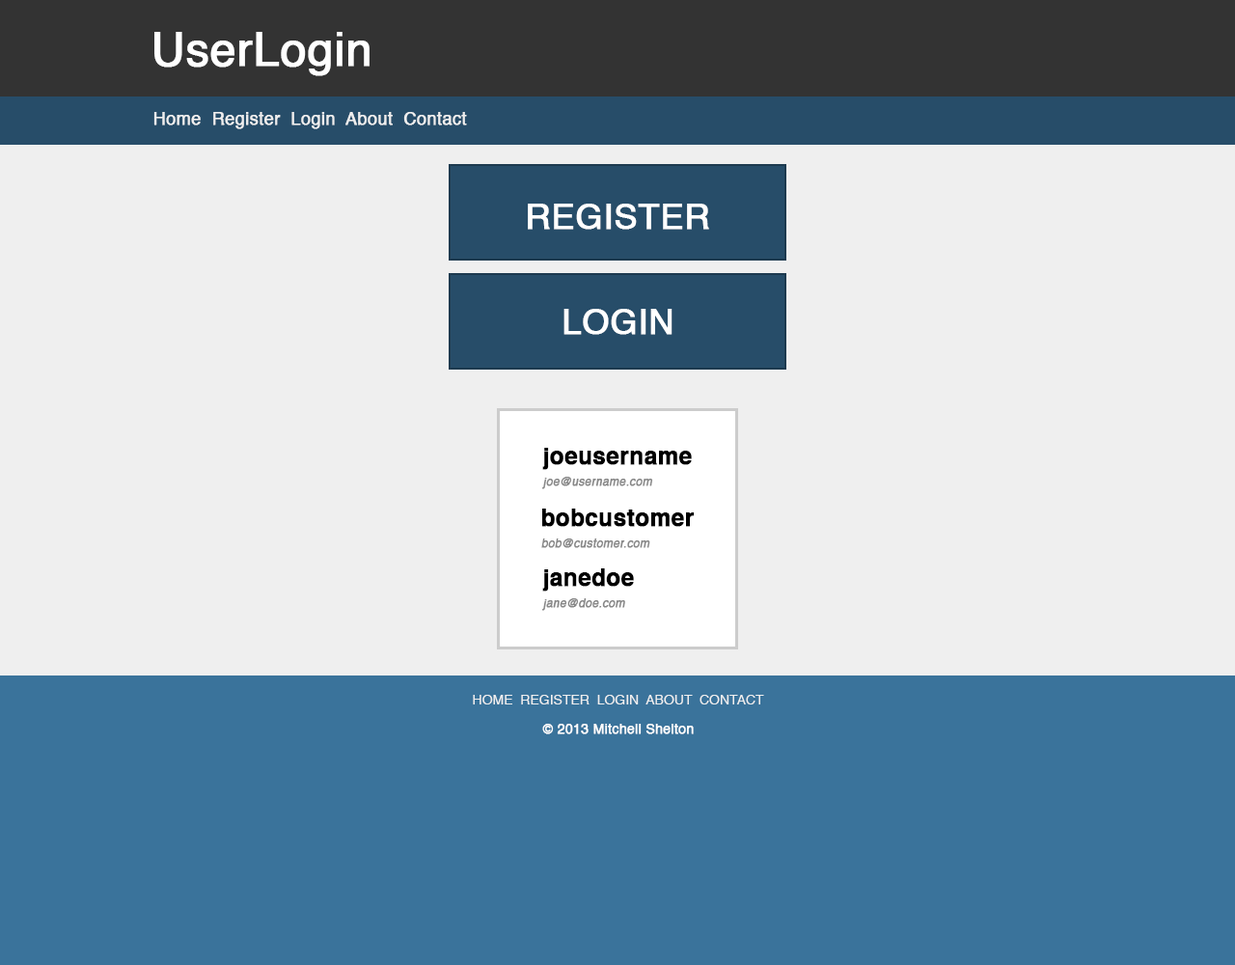
<style>
.page{position:relative;width:1235px;height:965px;background:#efefef}
.page>*{position:absolute;margin:0}
.t1{font:46.3px "Helvetica";color:#ffffff;font-weight:bold}
.t2{font:17.4px "Helvetica";color:#efefef;font-weight:bold}
.t3{font:34.7px "Helvetica";color:#ffffff;text-transform:uppercase;font-weight:bold}
.t4{font:23.2px "Helvetica-Bold";color:#000000;font-weight:bold}
.t5{font:11.6px "Helvetica";color:#888888;font-weight:bold;font-style:italic}
.t6{font:13.5px "Helvetica";color:#efefef;text-transform:uppercase}
.t7{font:13.5px "Helvetica";color:#ffffff;font-weight:bold}
</style>
<div class="page">
<p class="t1" style="left:154px;top:32px;width:216px;height:44px">UserLogin</p>
<p class="t2" style="left:153px;top:112px;width:314px;height:17px">Home  Register  Login  About  Contact</p>
<p class="t3" style="left:528px;top:204px;width:181px;height:26px">Register</p>
<p class="t3" style="left:564px;top:309px;width:109px;height:26px">Login</p>
<p class="t4" style="left:542px;top:448px;width:150px;height:22px">joeusername</p>
<p class="t5" style="left:542px;top:477px;width:111px;height:12px">joe@username.com</p>
<p class="t4" style="left:542px;top:509px;width:153px;height:18px">bobcustomer</p>
<p class="t5" style="left:541px;top:539px;width:110px;height:9px">bob@customer.com</p>
<p class="t4" style="left:542px;top:568px;width:92px;height:24px">janedoe</p>
<p class="t5" style="left:542px;top:598px;width:83px;height:13px">jane@doe.com</p>
<p class="t6" style="left:473px;top:695px;width:291px;height:10px">Home  Register  Login  About  Contact</p>
<p class="t7" style="left:542px;top:724px;width:152px;height:11px">© 2013 Mitchell Shelton</p>
</div>
